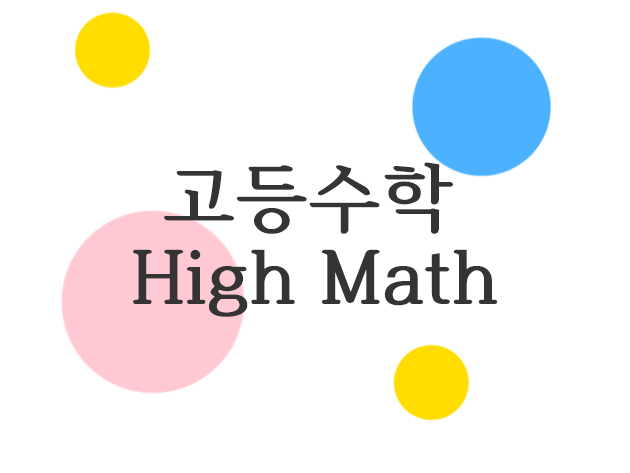
<style>
.page{position:relative;width:630px;height:473px;background:#ffffff}
.page>*{position:absolute;margin:0}
.t1{font:75px "HCRBatang-Bold";color:#343434}
</style>
<div class="page">
<p class="t1" style="left:164px;top:162px;width:289px;height:72px">고등수학</p>
<p class="t1" style="left:133px;top:249px;width:365px;height:68px">High Math</p>
</div>
